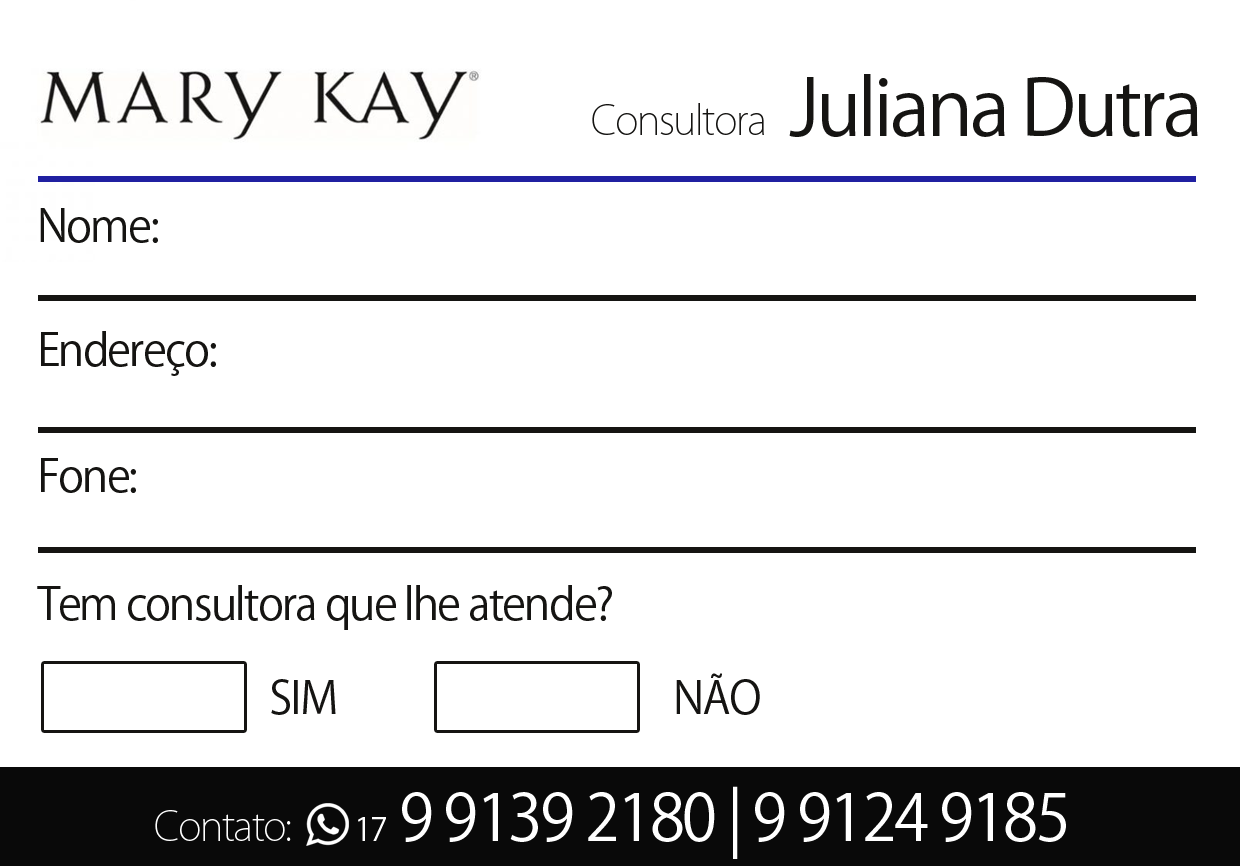
<style>
.page{position:relative;width:1240px;height:866px;background:#ffffff}
.page>*{position:absolute;margin:0}
.t1{font:77.3px "KozGoPr6N-Regular";letter-spacing:-0.04em;color:#151412}
.t2{font:39.9px "KozGoPro-ExtraLight";letter-spacing:-0.04em;color:#151412}
.t3{font:44.3px "KozGoPr6N-Regular";letter-spacing:-0.04em;color:#151412}
.t4{font:64px "KozGoPr6N-Regular";letter-spacing:-0.04em;color:#ffffff}
.t5{font:32px "KozGoPr6N-Regular";letter-spacing:-0.04em;color:#ffffff}
.t6{font:39.9px "KozGoPro-ExtraLight";letter-spacing:-0.04em;color:#ffffff}
</style>
<div class="page">
<p class="t1" style="left:789px;top:74px;width:409px;height:63px">Juliana Dutra</p>
<p class="t2" style="left:592px;top:103px;width:172px;height:32px">Consultora</p>
<p class="t3" style="left:40px;top:208px;width:118px;height:35px">Nome:</p>
<p class="t3" style="left:41px;top:331px;width:175px;height:45px">Endereço:</p>
<p class="t3" style="left:41px;top:458px;width:95px;height:35px">Fone:</p>
<p class="t3" style="left:37px;top:585px;width:575px;height:45px">Tem consultora que lhe atende?</p>
<p class="t3" style="left:676px;top:673px;width:84px;height:42px">NÃO</p>
<p class="t3" style="left:271px;top:679px;width:65px;height:36px">SIM</p>
<p class="t4" style="left:358px;top:786px;width:708px;height:73px"><span class="t5">17</span> 9 9139 2180 | 9 9124 9185</p>
<p class="t6" style="left:155px;top:810px;width:136px;height:31px">Contato:</p>
</div>
